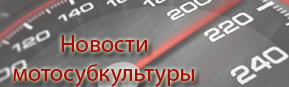
<style>
.page{position:relative;width:289px;height:87px}
.page>*{position:absolute;margin:0}
.t1{font:24px "MyriadPro-Regular";color:#a20c0c}
</style>
<div class="page">
<p class="t1" style="left:13px;top:35px;width:181px;height:52px;text-align:center">Новости<br>мотосубкультуры</p>
</div>
